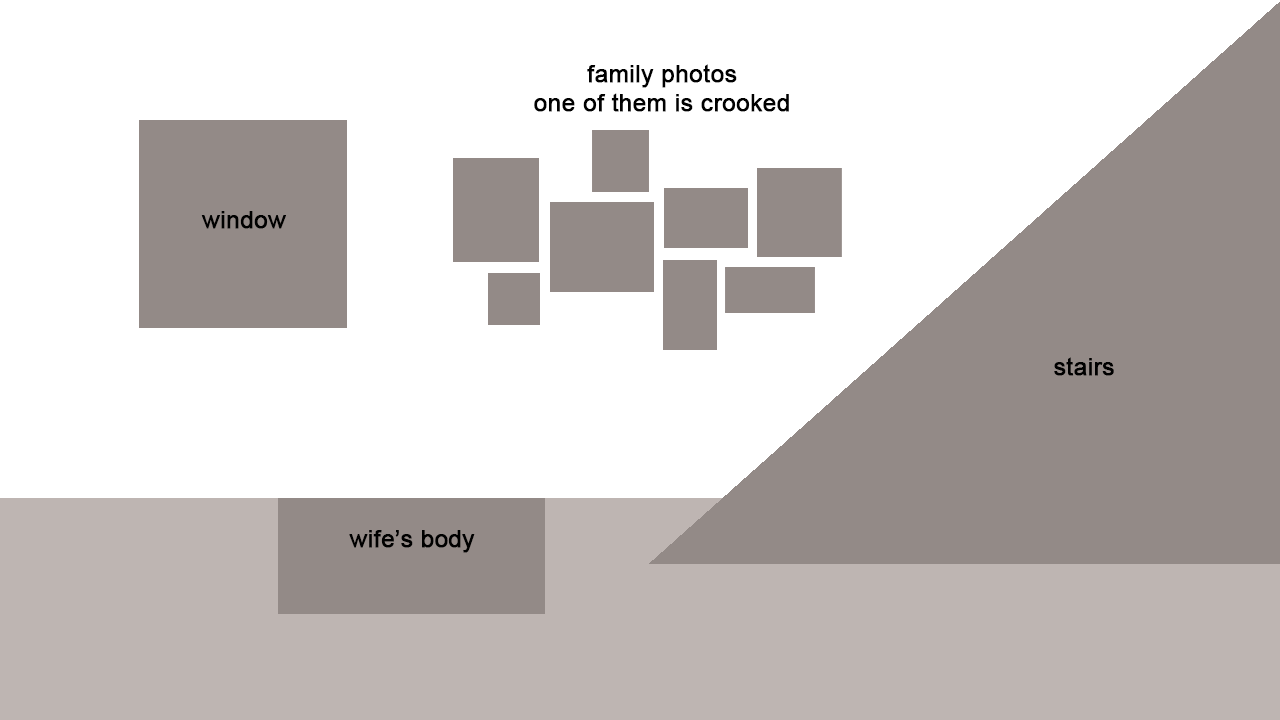
<style>
.page{position:relative;width:1280px;height:720px;background:#ffffff}
.page>*{position:absolute;margin:0}
.t1{font:24px "ArialMT";color:#000000;font-weight:bold}
</style>
<div class="page">
<p class="t1" style="left:534px;top:64px;width:255px;height:48px;text-align:center">family photos<br>one of them is crooked</p>
<p class="t1" style="left:201px;top:211px;width:85px;height:18px">window</p>
<p class="t1" style="left:1054px;top:357px;width:60px;height:19px">stairs</p>
<p class="t1" style="left:349px;top:530px;width:126px;height:23px">wife’s body</p>
</div>
